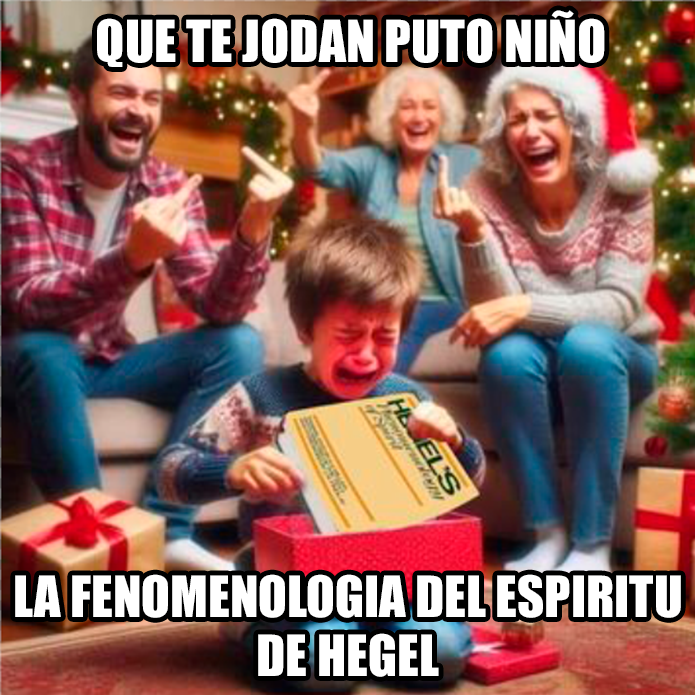
<style>
.page{position:relative;width:695px;height:695px}
.page>*{position:absolute;margin:0}
.t1{font:53.6px "Impact";color:#ffffff}
.t2{font:52.6px "Impact";color:#ffffff}
</style>
<div class="page">
<p class="t1" style="left:97px;top:10px;width:508px;height:57px">QUE TE JODAN PUTO NIÑO</p>
<p class="t2" style="left:15px;top:574px;width:666px;height:103px;text-align:center">LA FENOMENOLOGIA DEL ESPIRITU<br>DE HEGEL</p>
</div>
